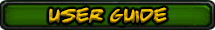
<style>
.page{position:relative;width:215px;height:30px}
.page>*{position:absolute;margin:0}
.t1{font:18px "adamwarren0.2"}
</style>
<div class="page">
<p class="t1" style="left:49px;top:7px;width:118px;height:16px">user guide</p>
</div>
